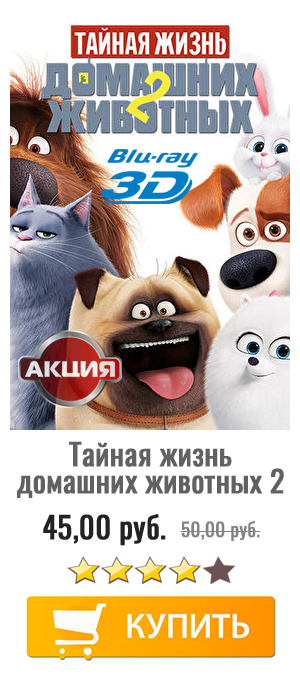
<style>
.page{position:relative;width:300px;height:675px;background:#ffffff}
.page>*{position:absolute;margin:0}
.t1{font:30px/27px "Oswald-Regular";color:#616161;font-weight:bold}
.t2{font:30px "Oswald-Regular";color:#242323;font-weight:bold}
.t3{font:19px "Oswald-Regular";color:#868282;font-weight:bold}
</style>
<div class="page">
<p class="t1" style="left:17px;top:441px;width:267px;height:57px">Тайная жизнь<br>домашних животных 2</p>
<p class="t2" style="left:43px;top:514px;width:123px;height:32px">45,00 руб.</p>
<p class="t3" style="left:180px;top:520px;width:81px;height:21px">50,00 руб.</p>
</div>
